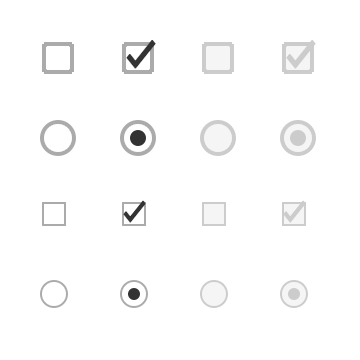
<style>
.page{position:relative;width:360px;height:360px;background:#ffffff}
.page>*{position:absolute;margin:0}
.t1{font:42px "MonotypeGurmukhi";color:#333333;font-weight:bold;scale:0.8 1}
.t2{font:42px "MonotypeGurmukhi";color:#cccccc;font-weight:bold;scale:0.8 1}
.t3{font:32px "MonotypeGurmukhi";color:#333333;font-weight:bold;scale:0.8 1}
.t4{font:32px "MonotypeGurmukhi";color:#cccccc;font-weight:bold;scale:0.8 1}
</style>
<div class="page">
<p class="t1" style="left:126px;top:40px;width:30px;height:29px">✓</p>
<p class="t2" style="left:286px;top:40px;width:30px;height:29px">✓</p>
<p class="t3" style="left:123px;top:200px;width:23px;height:23px">✓</p>
<p class="t4" style="left:283px;top:200px;width:23px;height:23px">✓</p>
</div>
